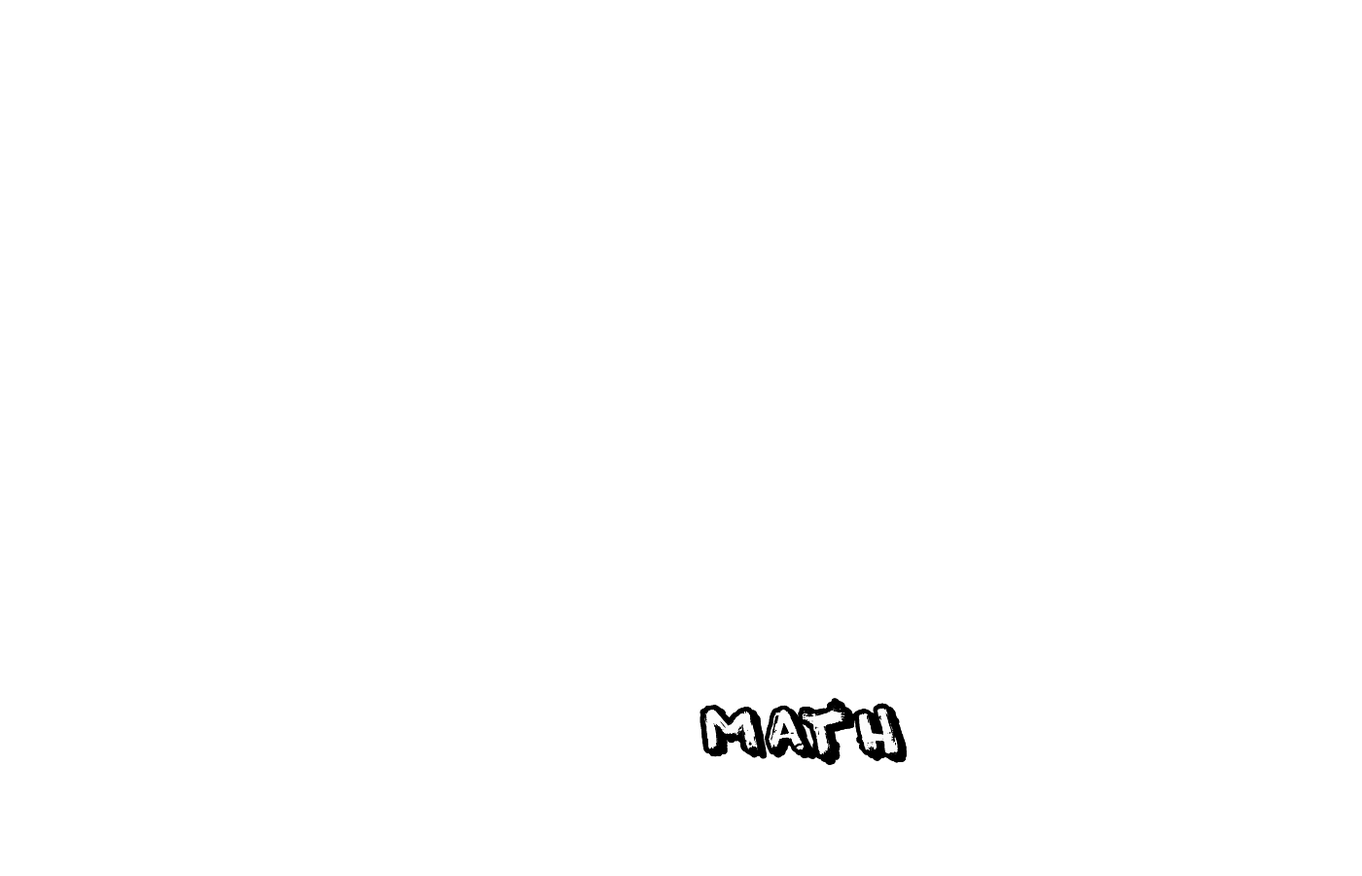
<style>
.page{position:relative;width:1362px;height:876px;background:#ffffff}
.page>*{position:absolute;margin:0}
.t1{font:73.6px "ThisNight";letter-spacing:0.08em;color:#000000}
</style>
<div class="page">
<p class="t1" style="left:699px;top:698px;width:208px;height:67px">MATH</p>
</div>
